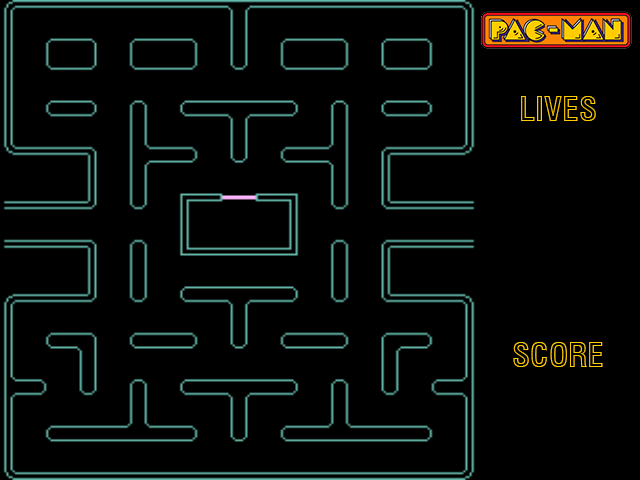
<style>
.page{position:relative;width:640px;height:480px;background:#000000}
.page>*{position:absolute;margin:0}
.t1{font:33.3px "Swiss721BT-BoldCondensedOutline";color:#ffcc00}
</style>
<div class="page">
<p class="t1" style="left:521px;top:96px;width:75px;height:25px">LIVES</p>
<p class="t1" style="left:513px;top:342px;width:90px;height:25px">SCORE</p>
</div>
